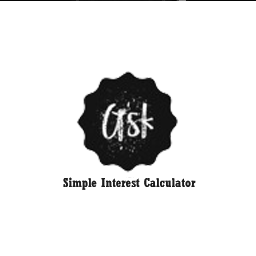
<style>
.page{position:relative;width:256px;height:256px;background:#ffffff}
.page>*{position:absolute;margin:0}
.t1{font:12.5px "Rockwell-CondensedBold";color:#1e1e1e}
</style>
<div class="page">
<p class="t1" style="left:63px;top:176px;width:133px;height:13px">Simple Interest Calculator</p>
</div>
